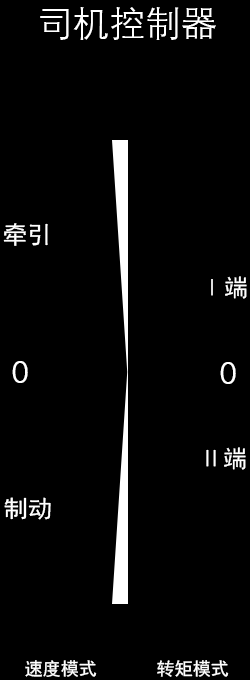
<style>
.page{position:relative;width:250px;height:680px;background:#000000}
.page>*{position:absolute;margin:0}
.t1{font:36px "DengXian";color:#ffffff}
.t2{font:24px "SimHei";color:#ffffff}
.t3{font:30px "HYZhengYuan-EEW";color:#ffffff}
.t4{font:18px "SimHei";color:#ffffff}
</style>
<div class="page">
<p class="t1" style="left:40px;top:7px;width:176px;height:33px">司机控制器</p>
<p class="t2" style="left:3px;top:223px;width:45px;height:23px">牵引</p>
<p class="t2" style="left:211px;top:276px;width:36px;height:23px">Ⅰ端</p>
<p class="t3" style="left:12px;top:361px;width:16px;height:22px">0</p>
<p class="t3" style="left:220px;top:362px;width:16px;height:22px">0</p>
<p class="t2" style="left:206px;top:447px;width:40px;height:23px">Ⅱ端</p>
<p class="t2" style="left:4px;top:497px;width:47px;height:23px">制动</p>
<p class="t4" style="left:25px;top:660px;width:72px;height:17px">速度模式</p>
<p class="t4" style="left:157px;top:660px;width:72px;height:17px">转矩模式</p>
</div>
